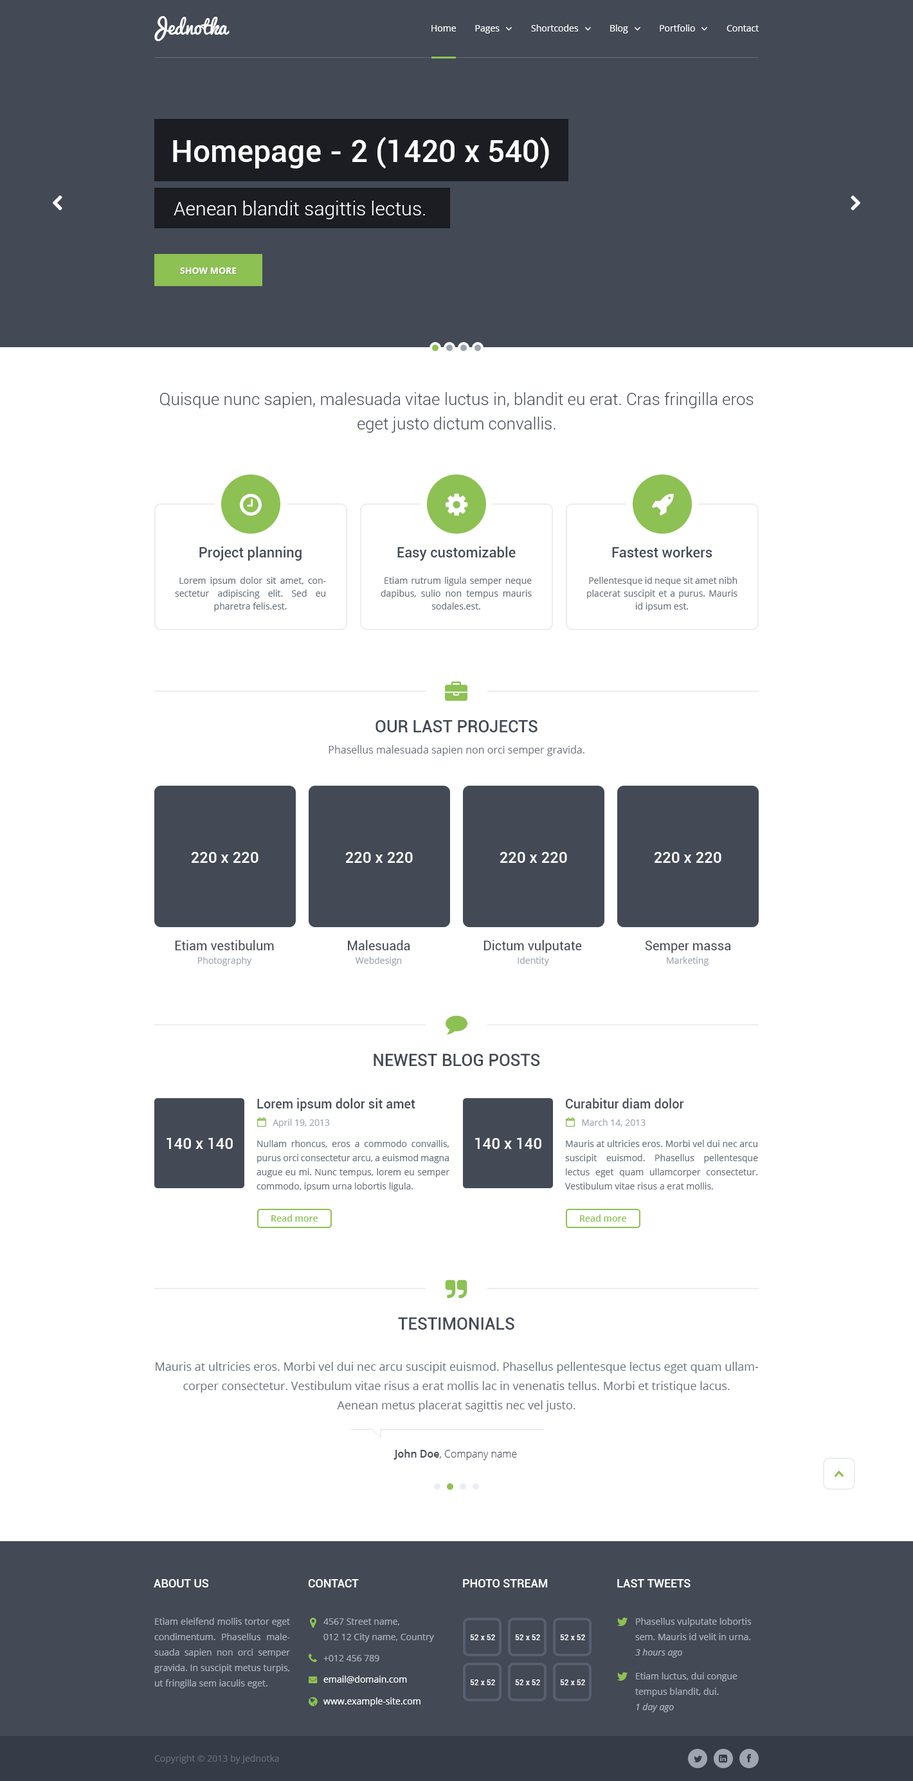
<style>
.page{position:relative;width:913px;height:1781px;background:#ffffff}
.page>*{position:absolute;margin:0}
.t1{font:19.3px "Pacifico";color:#ffffff}
.t2{font:9px "OpenSans";color:#ffffff}
.t3{font:30.9px "Roboto-Medium";color:#ffffff}
.t4{font:19.3px "Roboto-Light";color:#ffffff}
.t5{font:9px "OpenSans-Bold";color:#ffffff;text-transform:uppercase}
.t6{font:16.7px/24.4px "Roboto-Light";color:#434955}
.t7{font:14.1px "Roboto-Medium";color:#434955}
.t8{font:9px/12.9px "OpenSans";color:#676f7a}
.t9{font:9px/15.4px "OpenSans";color:#676f7a}
.t10{font:16.7px "Roboto-Medium";color:#434955;text-transform:uppercase}
.t11{font:10.3px "OpenSans";color:#676f7a}
.t12{font:15.4px "Roboto-Medium";color:#ffffff}
.t13{font:12.9px "Roboto-Regular";color:#434955}
.t14{font:9px "OpenSans";color:#9ca4af}
.t15{font:12.9px "Roboto-Medium";color:#434955}
.t16{font:9px/14.1px "OpenSans";color:#676f7a}
.t17{font:9px "OpenSans-Semibold";color:#8dc153}
.t18{font:11.6px/19.3px "OpenSans";color:#676f7a}
.t19{font:10.3px "OpenSans-Light";color:#434955}
.t20{font:10.3px "OpenSans-Semibold";color:#434955}
.t21{font:11.6px "Roboto-Medium";color:#ffffff;text-transform:uppercase}
.t22{font:9px/15.4px "OpenSans";color:#aab2bd}
.t23{font:7.7px "Roboto-Medium";color:#ffffff}
.t24{font:9px "OpenSans-Italic";color:#aab2bd}
.t25{font:9px "OpenSans";color:#aab2bd}
.t26{font:9px "OpenSans";color:#656d78}
</style>
<div class="page">
<p class="t1" style="left:154px;top:16px;width:76px;height:25px">Jednotka</p>
<p class="t2" style="left:431px;top:25px;width:25px;height:7px">Home</p>
<p class="t2" style="left:475px;top:25px;width:25px;height:8px">Pages</p>
<p class="t2" style="left:531px;top:24px;width:48px;height:8px">Shortcodes</p>
<p class="t2" style="left:610px;top:24px;width:18px;height:9px">Blog</p>
<p class="t2" style="left:660px;top:24px;width:35px;height:8px">Portfolio</p>
<p class="t2" style="left:726px;top:25px;width:33px;height:7px">Contact</p>
<p class="t3" style="left:173px;top:137px;width:376px;height:31px">Homepage - 2 (1420 x 540)</p>
<p class="t4" style="left:174px;top:201px;width:251px;height:18px">Aenean blandit sagittis lectus.</p>
<p class="t5" style="left:180px;top:267px;width:57px;height:7px">Show more</p>
<p class="t6" style="left:160px;top:392px;width:593px;height:41px;text-align:center">Quisque nunc sapien, malesuada vitae luctus in, blandit eu erat. Cras fringilla eros eget justo dictum convallis.</p>
<p class="t7" style="left:199px;top:546px;width:103px;height:15px">Project planning</p>
<p class="t7" style="left:397px;top:546px;width:119px;height:15px">Easy customizable</p>
<p class="t7" style="left:612px;top:546px;width:100px;height:11px">Fastest workers</p>
<p class="t8" style="left:175px;top:577px;width:151px;height:34px;text-align:justify"><span class="t9"> </span>Lorem ipsum dolor sit amet, consectetur adipiscing elit. Sed eu pharetra felis.est.</p>
<p class="t8" style="left:381px;top:577px;width:151px;height:32px;text-align:justify"><span class="t9"> </span>Etiam rutrum ligula semper neque dapibus, sulio non tempus mauris sodales.est.</p>
<p class="t8" style="left:587px;top:577px;width:150px;height:34px;text-align:justify"><span class="t9"> </span>Pellentesque id neque sit amet nibh placerat suscipit et a purus. Mauris id ipsum est.</p>
<p class="t10" style="left:375px;top:720px;width:162px;height:12px">Our last projects</p>
<p class="t11" style="left:328px;top:745px;width:256px;height:11px">Phasellus malesuada sapien non orci semper gravida.</p>
<p class="t12" style="left:191px;top:852px;width:67px;height:11px">220 x 220</p>
<p class="t12" style="left:345px;top:852px;width:68px;height:11px">220 x 220</p>
<p class="t12" style="left:500px;top:852px;width:67px;height:11px">220 x 220</p>
<p class="t12" style="left:654px;top:852px;width:67px;height:11px">220 x 220</p>
<p class="t13" style="left:175px;top:940px;width:99px;height:10px">Etiam vestibulum</p>
<p class="t13" style="left:348px;top:940px;width:62px;height:10px">Malesuada</p>
<p class="t13" style="left:483px;top:940px;width:99px;height:13px">Dictum vulputate</p>
<p class="t13" style="left:645px;top:941px;width:86px;height:12px">Semper massa</p>
<p class="t14" style="left:198px;top:957px;width:54px;height:9px">Photography</p>
<p class="t14" style="left:355px;top:957px;width:47px;height:9px">Webdesign</p>
<p class="t14" style="left:518px;top:957px;width:31px;height:9px">Identity</p>
<p class="t14" style="left:667px;top:957px;width:41px;height:9px">Marketing</p>
<p class="t10" style="left:374px;top:1054px;width:166px;height:12px">Newest blog posts</p>
<p class="t15" style="left:257px;top:1098px;width:158px;height:13px">Lorem ipsum dolor sit amet</p>
<p class="t15" style="left:566px;top:1098px;width:118px;height:10px">Curabitur diam dolor</p>
<p class="t14" style="left:273px;top:1119px;width:57px;height:9px">April 19, 2013</p>
<p class="t14" style="left:582px;top:1119px;width:63px;height:7px">March 14, 2013</p>
<p class="t12" style="left:166px;top:1137px;width:67px;height:12px">140 x 140</p>
<p class="t16" style="left:256px;top:1140px;width:193px;height:51px;text-align:justify">Nullam rhoncus, eros a commodo convallis, purus orci consectetur arcu, a euismod magna augue eu mi. Nunc tempus, lorem eu semper commodo, ipsum urna lobortis ligula.</p>
<p class="t12" style="left:475px;top:1137px;width:66px;height:12px">140 x 140</p>
<p class="t16" style="left:565px;top:1140px;width:193px;height:49px;text-align:justify">Mauris at ultricies eros. Morbi vel dui nec arcu suscipit euismod. Phasellus pellentesque lectus eget quam ullamcorper consectetur. Vestibulum vitae risus a erat mollis.</p>
<p class="t17" style="left:271px;top:1214px;width:47px;height:7px">Read more</p>
<p class="t17" style="left:580px;top:1214px;width:46px;height:7px">Read more</p>
<p class="t10" style="left:398px;top:1317px;width:116px;height:12px">Testimonials</p>
<p class="t18" style="left:156px;top:1362px;width:603px;height:50px;text-align:center">Mauris at ultricies eros. Morbi vel dui nec arcu suscipit euismod. Phasellus pellentesque lectus eget quam ullamcorper consectetur. Vestibulum vitae risus a erat mollis lac in venenatis tellus. Morbi et tristique lacus. <br>Aenean metus placerat sagittis nec vel justo.</p>
<p class="t19" style="left:393px;top:1449px;width:124px;height:11px"><span class="t20">John Doe</span>, Company name</p>
<p class="t21" style="left:154px;top:1579px;width:55px;height:8px">About us</p>
<p class="t21" style="left:308px;top:1579px;width:51px;height:8px">CONTACT</p>
<p class="t21" style="left:463px;top:1579px;width:85px;height:8px">Photo stream</p>
<p class="t21" style="left:617px;top:1579px;width:73px;height:8px">Last tweets</p>
<p class="t22" style="left:154px;top:1617px;width:136px;height:71px;text-align:justify">Etiam eleifend mollis tortor eget condimentum. Phasellus malesuada sapien non orci semper gravida. In suscipit metus turpis, ut fringilla sem iaculis eget.</p>
<p class="t22" style="left:323px;top:1618px;width:111px;height:24px">4567 Street name, <br>012 12 City name, Country</p>
<p class="t22" style="left:635px;top:1617px;width:117px;height:23px">Phasellus vulputate lobortis sem. Mauris id velit in urna.</p>
<p class="t23" style="left:470px;top:1634px;width:25px;height:6px">52 x 52</p>
<p class="t23" style="left:515px;top:1634px;width:25px;height:6px">52 x 52</p>
<p class="t23" style="left:560px;top:1634px;width:25px;height:6px">52 x 52</p>
<p class="t24" style="left:635px;top:1648px;width:47px;height:9px">3 hours ago</p>
<p class="t25" style="left:323px;top:1655px;width:56px;height:6px">+012 456 789</p>
<p class="t22" style="left:635px;top:1672px;width:102px;height:25px">Etiam luctus, dui congue tempus blandit, dui.</p>
<p class="t2" style="left:323px;top:1675px;width:84px;height:8px">email@domain.com</p>
<p class="t23" style="left:470px;top:1679px;width:25px;height:6px">52 x 52</p>
<p class="t23" style="left:515px;top:1679px;width:25px;height:6px">52 x 52</p>
<p class="t23" style="left:560px;top:1679px;width:25px;height:6px">52 x 52</p>
<p class="t2" style="left:323px;top:1697px;width:97px;height:9px">www.example-site.com</p>
<p class="t24" style="left:636px;top:1703px;width:38px;height:9px">1 day ago</p>
<p class="t26" style="left:154px;top:1754px;width:125px;height:9px">Copyright © 2013 by Jednotka</p>
</div>
